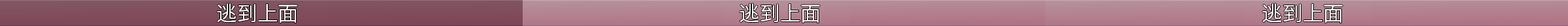
<style>
.page{position:relative;width:1568px;height:26px}
.page>*{position:absolute;margin:0}
.t1{font:20.6px "SourceHanSansSC-Normal";color:#ffffff}
</style>
<div class="page">
<p class="t1" style="left:217px;top:3px;width:80px;height:20px">逃到上面</p>
<p class="t1" style="left:740px;top:3px;width:80px;height:20px">逃到上面</p>
<p class="t1" style="left:1262px;top:3px;width:81px;height:20px">逃到上面</p>
</div>
